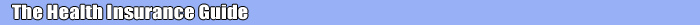
<style>
.page{position:relative;width:700px;height:25px;background:#98b1f6}
.page>*{position:absolute;margin:0}
.t1{font:18px "Impact";color:#ffffff;scale:1.17 1}
</style>
<div class="page">
<p class="t1" style="left:12px;top:4px;width:236px;height:16px">The Health Insurance Guide</p>
</div>
